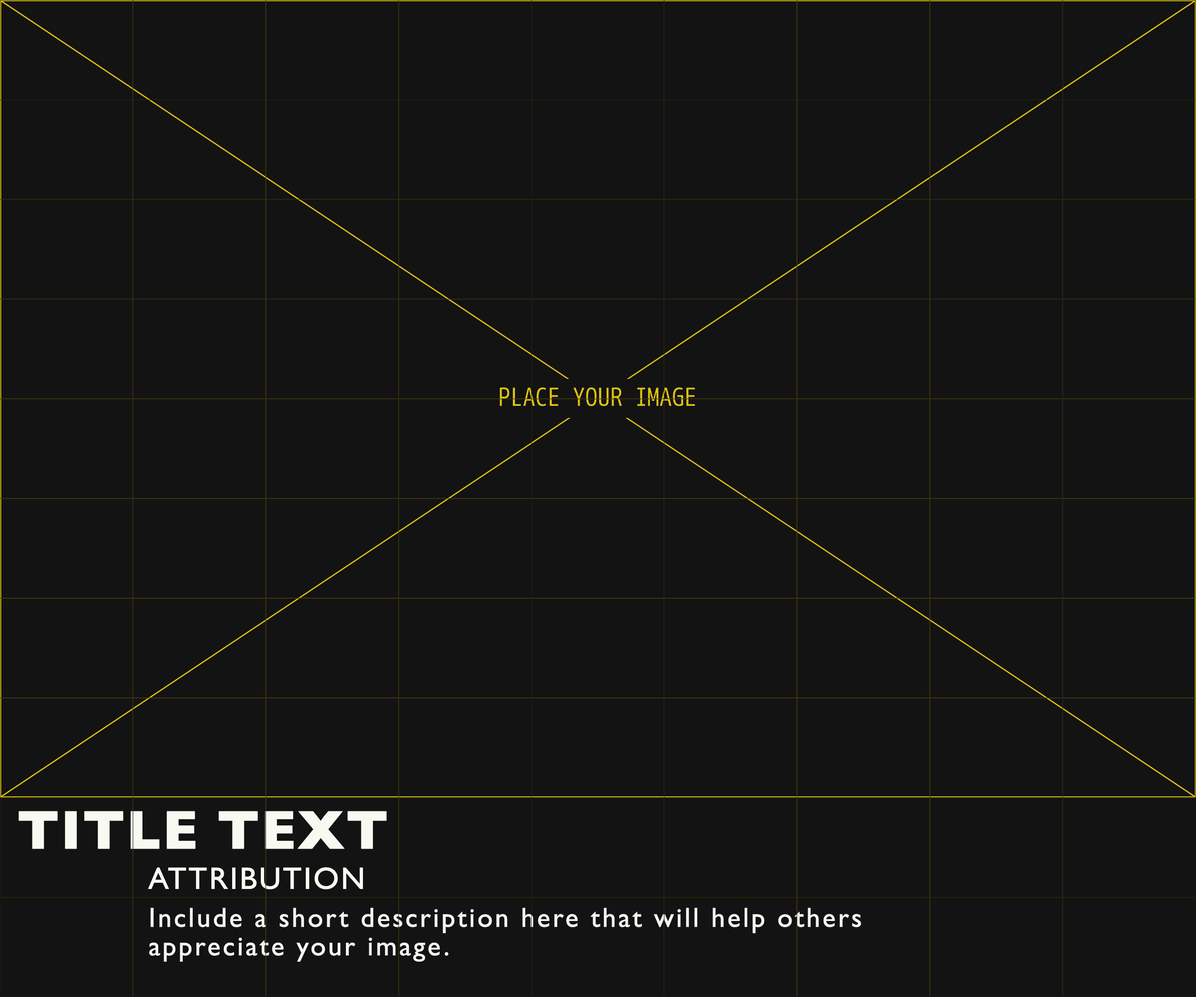
<style>
.page{position:relative;width:1196px;height:997px;background:#131313}
.page>*{position:absolute;margin:0}
.t1{font:54.8px "GillSans-Bold";color:#f9f9f1;font-weight:bold}
.t2{font:30.8px "GillSans";letter-spacing:0.04em;color:#f9f9f1;font-weight:bold}
.t3{font:27.4px/28.5px "GillSans";letter-spacing:0.06em;color:#f5f6f0;font-weight:bold}
</style>
<div class="page">
<p class="t1" style="left:19px;top:811px;width:368px;height:38px">TITLE TEXT</p>
<p class="t2" style="left:148px;top:867px;width:215px;height:22px">ATTRIBUTION</p>
<p class="t3" style="left:149px;top:908px;width:712px;height:54px">Include a short description here that will help others appreciate your image.</p>
</div>
